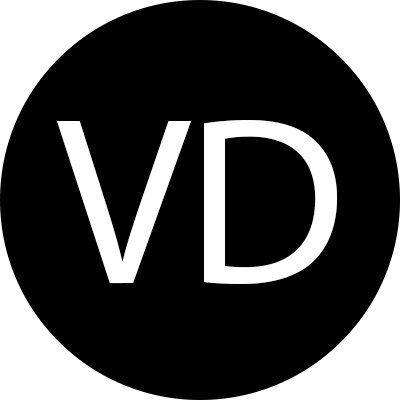
<style>
.page{position:relative;width:400px;height:400px;background:#000000}
.page>*{position:absolute;margin:0}
.t1{font:240.4px "MyriadPro-Regular";color:#ffffff}
</style>
<div class="page">
<p class="t1" style="left:57px;top:120px;width:280px;height:164px">VD</p>
</div>
